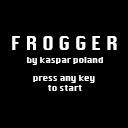
<style>
.page{position:relative;width:128px;height:128px;background:#000000}
.page>*{position:absolute;margin:0}
.t1{font:18px "Krungthep";color:#ffffff}
.t2{font:8.3px "Krungthep";color:#ffffff}
</style>
<div class="page">
<p class="t1" style="left:12px;top:36px;width:105px;height:14px">F R O G G E R ROGGER</p>
<p class="t2" style="left:27px;top:57px;width:76px;height:8px">by kaspar poland</p>
<p class="t2" style="left:33px;top:75px;width:62px;height:16px;text-align:center">press any key <br>to start</p>
</div>
